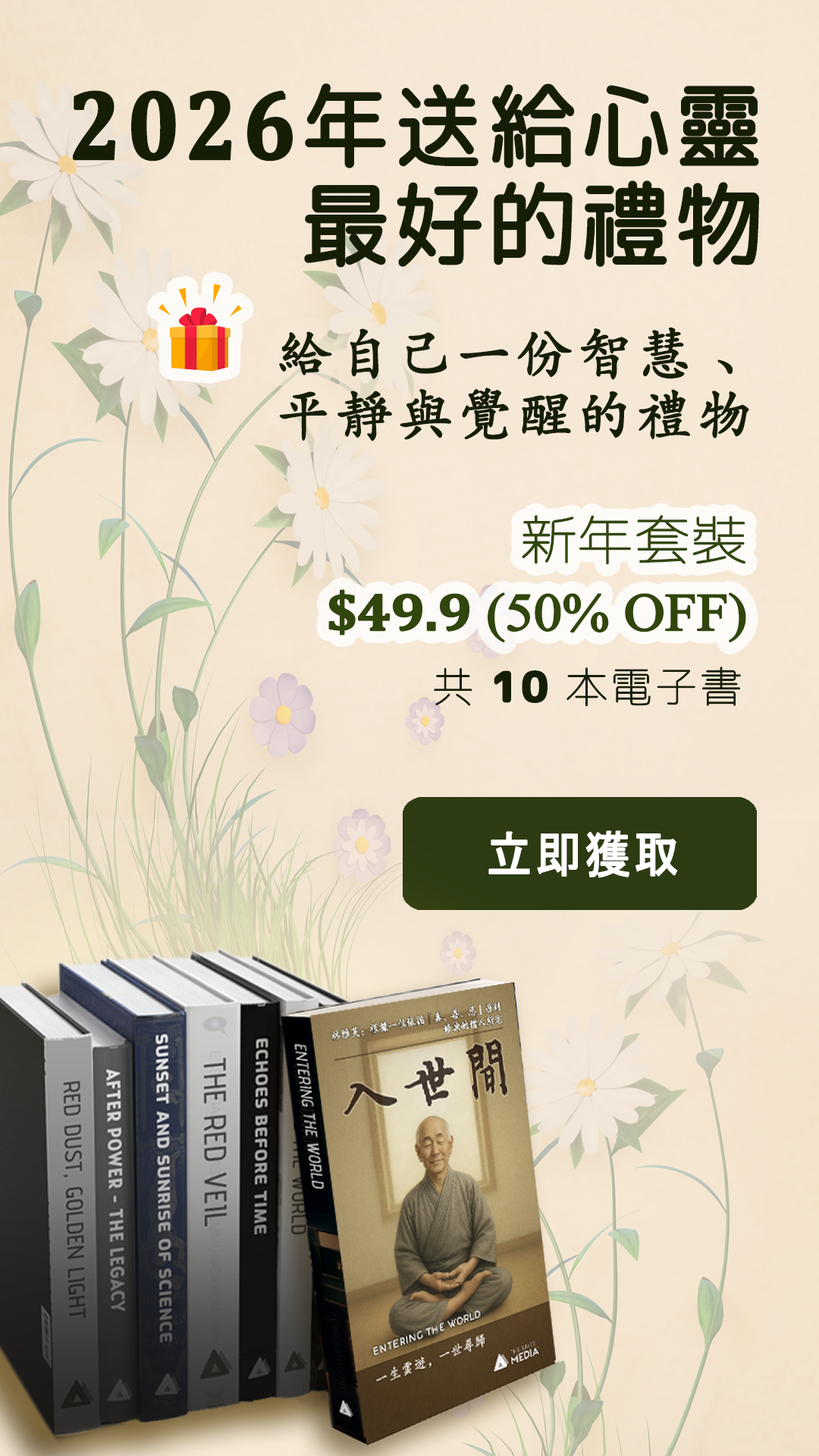
<style>
.page{position:relative;width:819px;height:1456px}
.page>*{position:absolute;margin:0}
.t1{font:90.9px/98.7px "RoundedMplus1c-Regular";letter-spacing:0.05em;color:#151e05;font-weight:bold;scale:0.95 1}
.t2{font:99.2px/98.7px "Cambria-Bold";letter-spacing:0.05em;color:#151e05;font-weight:bold;scale:0.87 1}
.t3{font:54.6px/60.7px "CN-Khai3.0";letter-spacing:0.075em;color:#151e05;font-weight:bold}
.t4{font:53.2px/71px "TimesNewRomanPSMT";letter-spacing:-0.025em;color:#31460c;font-weight:bold;scale:1.07 1}
.t5{font:53.2px/71px "RoundedMplus1c-Thin";letter-spacing:-0.025em;color:#31460c;font-weight:bold;scale:1.07 1}
.t6{font:53.2px/71px "Cambria-Bold";letter-spacing:-0.025em;color:#31460c;font-weight:bold;scale:1.07 1}
.t7{font:41.7px "RoundedMplus1c-Thin";letter-spacing:0.05em;color:#151e05;font-weight:bold}
.t8{font:41.7px "RoundedMplus1c-ExtraBold";letter-spacing:0.05em;color:#151e05;font-weight:bold}
.t9{font:50px "MS-Gothic";letter-spacing:0.05em;color:#ffffff;font-weight:bold;scale:0.91 1}
</style>
<div class="page">
<p class="t1" style="left:73px;top:83px;width:686px;height:185px;text-align:right"><span class="t2">2026</span>年送給心靈<br>最好的禮物</p>
<p class="t3" style="left:279px;top:327px;width:470px;height:114px;text-align:right">給自己一份智慧、<br>平靜與覺醒的禮物</p>
<p class="t4" style="left:328px;top:515px;width:418px;height:128px;text-align:right"><span class="t5">新年套裝<br> </span><span class="t6">$49.9</span> (50% OFF)</p>
<p class="t7" style="left:434px;top:667px;width:307px;height:40px">共 <span class="t8">10</span> 本電子書</p>
<p class="t9" style="left:488px;top:830px;width:190px;height:48px">立即獲取</p>
</div>
